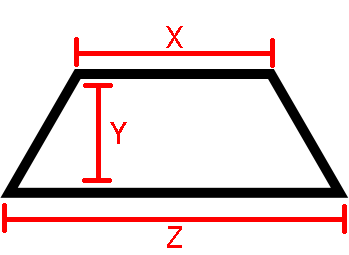
<style>
.page{position:relative;width:349px;height:255px;background:#ffffff}
.page>*{position:absolute;margin:0}
.t1{font:30px "Tahoma";color:#ff0000}
</style>
<div class="page">
<p class="t1" style="left:166px;top:26px;width:17px;height:22px">X</p>
<p class="t1" style="left:110px;top:122px;width:17px;height:22px">Y</p>
<p class="t1" style="left:167px;top:226px;width:15px;height:22px">Z</p>
</div>
